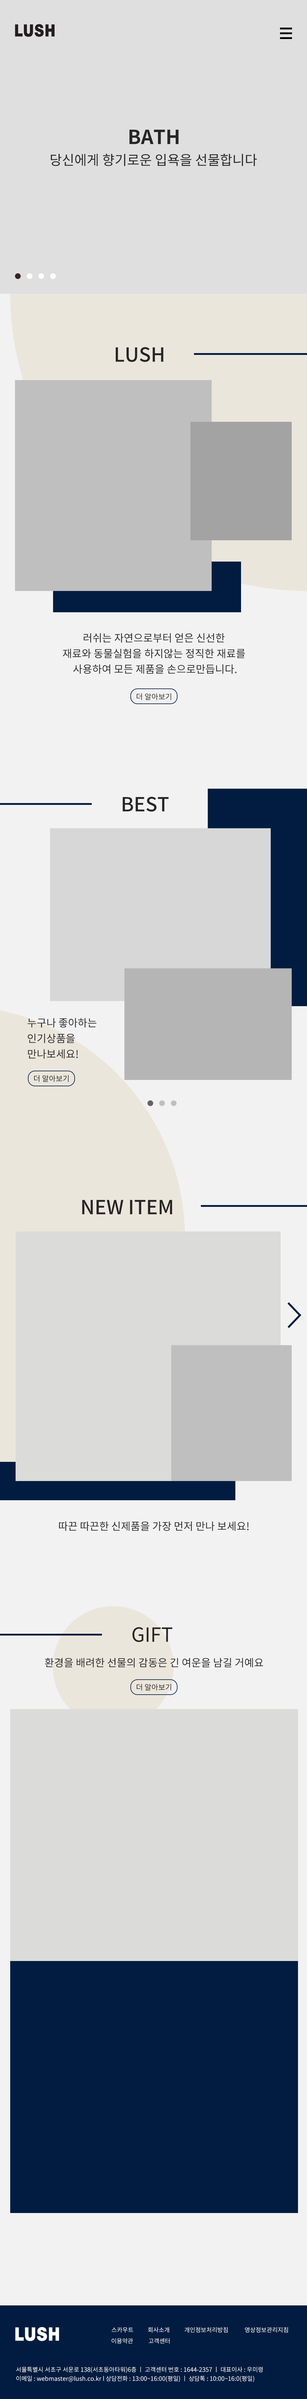
<style>
.page{position:relative;width:307px;height:2399px;background:#f2f2f2}
.page>*{position:absolute;margin:0}
.t1{font:19.5px "NotoSansCJKkr-Bold";color:#262626}
.t2{font:13.5px "NotoSansCJKkr-Regular";color:#262626}
.t3{font:19.5px "NotoSansCJKkr-Medium";color:#262626}
.t4{font:10.5px/15.6px "NotoSansCJKkr-Regular";color:#262626}
.t5{font:7.5px "NotoSansCJKkr-Regular";color:#262626}
.t6{font:10.5px "NotoSansCJKkr-Regular";color:#262626}
.t7{font:19.5px "NotoSansCJKkr-Regular";color:#262626}
.t8{font:6px "NotoSansCJKkr-Regular";color:#ffffff}
.t9{font:6px/9px "NotoSansCJKkr-Regular";color:#ffffff}
</style>
<div class="page">
<p class="t1" style="left:129px;top:130px;width:50px;height:14px">BATH</p>
<p class="t2" style="left:51px;top:154px;width:206px;height:12px">당신에게 향기로운 입욕을 선물합니다</p>
<p class="t3" style="left:116px;top:347px;width:48px;height:15px">LUSH</p>
<p class="t4" style="left:63px;top:633px;width:182px;height:41px;text-align:center">러쉬는 자연으로부터 얻은 신선한 <br>재료와 동물실험을 하지않는 정직한 재료를 <br>사용하여 모든 제품을 손으로만듭니다.</p>
<p class="t5" style="left:137px;top:693px;width:34px;height:7px">더 알아보기</p>
<p class="t3" style="left:123px;top:797px;width:46px;height:15px">BEST</p>
<p class="t4" style="left:28px;top:1018px;width:69px;height:41px">누구나 좋아하는<br>인기상품을 <br>만나보세요!</p>
<p class="t5" style="left:34px;top:1075px;width:35px;height:7px">더 알아보기</p>
<p class="t3" style="left:82px;top:1200px;width:90px;height:14px">NEW ITEM</p>
<p class="t6" style="left:59px;top:1521px;width:190px;height:10px">따끈 따끈한 신제품을 가장 먼저 만나 보세요!</p>
<p class="t7" style="left:132px;top:1627px;width:40px;height:15px">GIFT</p>
<p class="t6" style="left:45px;top:1658px;width:218px;height:10px">환경을 배려한 선물의 감동은 긴 여운을 남길 거예요</p>
<p class="t5" style="left:137px;top:1684px;width:34px;height:7px">더 알아보기</p>
<p class="t8" style="left:112px;top:2327px;width:21px;height:6px">스카우트</p>
<p class="t8" style="left:148px;top:2327px;width:21px;height:6px">회사소개</p>
<p class="t8" style="left:185px;top:2327px;width:43px;height:6px">개인정보처리방침</p>
<p class="t8" style="left:245px;top:2327px;width:43px;height:6px">영상정보관리지침</p>
<p class="t8" style="left:112px;top:2338px;width:21px;height:6px">이용약관</p>
<p class="t8" style="left:149px;top:2338px;width:21px;height:6px">고객센터</p>
<p class="t9" style="left:16px;top:2367px;width:247px;height:15px">서울특별시 서초구 서운로 138(서초동아타워)6층 ㅣ 고객센터 번호 : 1644-2357 ㅣ 대표이사 : 우미령<br>이메일 : webmaster@lush.co.kr l 상담전화 : 13:00~16:00(평일) ㅣ 상담톡 : 10:00~16:0(평일)</p>
</div>
